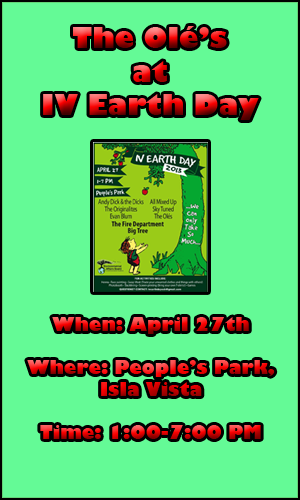
<style>
.page{position:relative;width:300px;height:500px;background:#64fa96}
.page>*{position:absolute;margin:0}
.t1{font:28px "GillSans-UltraBold"}
.t2{font:18px "GillSans-UltraBold"}
</style>
<div class="page">
<p class="t1" style="left:43px;top:26px;width:216px;height:94px;text-align:center">The Olé’s<br>at<br>IV Earth Day</p>
<p class="t2" style="left:27px;top:317px;width:248px;height:122px;text-align:center">When: April 27th<br><br>Where: People’s Park,<br>Isla Vista<br><br>Time: 1:00-7:00 PM</p>
</div>
